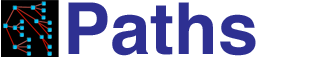
<style>
.page{position:relative;width:320px;height:57px;background:#ffffff}
.page>*{position:absolute;margin:0}
.t1{font:71.7px "Helvetica-Bold";color:#2e3092}
</style>
<div class="page">
<p class="t1" style="left:68px;top:2px;width:188px;height:54px">Paths</p>
</div>
